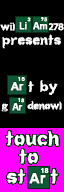
<style>
.page{position:relative;width:64px;height:192px;background:#000000}
.page>*{position:absolute;margin:0}
.t1{font:5px "FuturaBT-Heavy";letter-spacing:0.02em;color:#ffffff;font-weight:bold}
.t2{font:14.5px "HeartBreakingBad";letter-spacing:0.02em;color:#ffffff;font-weight:bold}
.t3{font:8.5px "Arial-BoldMT";color:#ffffff;font-weight:bold}
.t4{font:10px "MyriadConceptRoman-SemiboldSemiExtended";letter-spacing:-0.1em;color:#ffffff;font-weight:bold}
.t5{font:19px "HeartBreakingBad";letter-spacing:0.02em;color:#ffffff;font-weight:bold}
.t6{font:5.8px "FuturaBT-Heavy";letter-spacing:0.02em;color:#ffffff;font-weight:bold}
.t7{font:10.5px "Arial-BoldMT";letter-spacing:0.011em;color:#ffffff;font-weight:bold}
.t8{font:20px "HeartBreakingBad";letter-spacing:0.02em;color:#ffffff;font-weight:bold}
.t9{font:14.5px "HeartBreakingBad";color:#ffffff;font-weight:bold}
.t10{font:14px "Arial-BoldMT";color:#ffffff;font-weight:bold}
.t11{font:6.5px "Arial-BoldMT";letter-spacing:0.02em;color:#ffffff;font-weight:bold}
</style>
<div class="page">
<p class="t1" style="left:27px;top:17px;width:4px;height:5px">3</p>
<p class="t1" style="left:40px;top:17px;width:8px;height:5px">95</p>
<p class="t2" style="left:0px;top:22px;width:15px;height:9px">wil</p>
<p class="t3" style="left:19px;top:22px;width:8px;height:8px">Li</p>
<p class="t3" style="left:33px;top:22px;width:15px;height:8px">Am</p>
<p class="t4" style="left:48px;top:23px;width:16px;height:8px">278</p>
<p class="t5" style="left:2px;top:34px;width:59px;height:15px">presents</p>
<p class="t6" style="left:18px;top:77px;width:7px;height:4px">18</p>
<p class="t7" style="left:10px;top:82px;width:14px;height:9px">Ar</p>
<p class="t8" style="left:28px;top:80px;width:30px;height:15px">t by</p>
<p class="t9" style="left:1px;top:101px;width:61px;height:11px">g    denowl</p>
<p class="t1" style="left:18px;top:98px;width:7px;height:5px">18</p>
<p class="t3" style="left:12px;top:103px;width:11px;height:8px">Ar</p>
<p class="t10" style="left:29px;top:173px;width:17px;height:11px">Ar</p>
<p class="t11" style="left:40px;top:168px;width:9px;height:5px">18</p>
</div>
